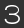
<style>
.page{position:relative;width:24px;height:28px;background:#333333}
.page>*{position:absolute;margin:0}
.t1{font:27.3px "NexaLight";color:#ffffff}
</style>
<div class="page">
<p class="t1" style="left:4px;top:5px;width:16px;height:19px">3</p>
</div>
